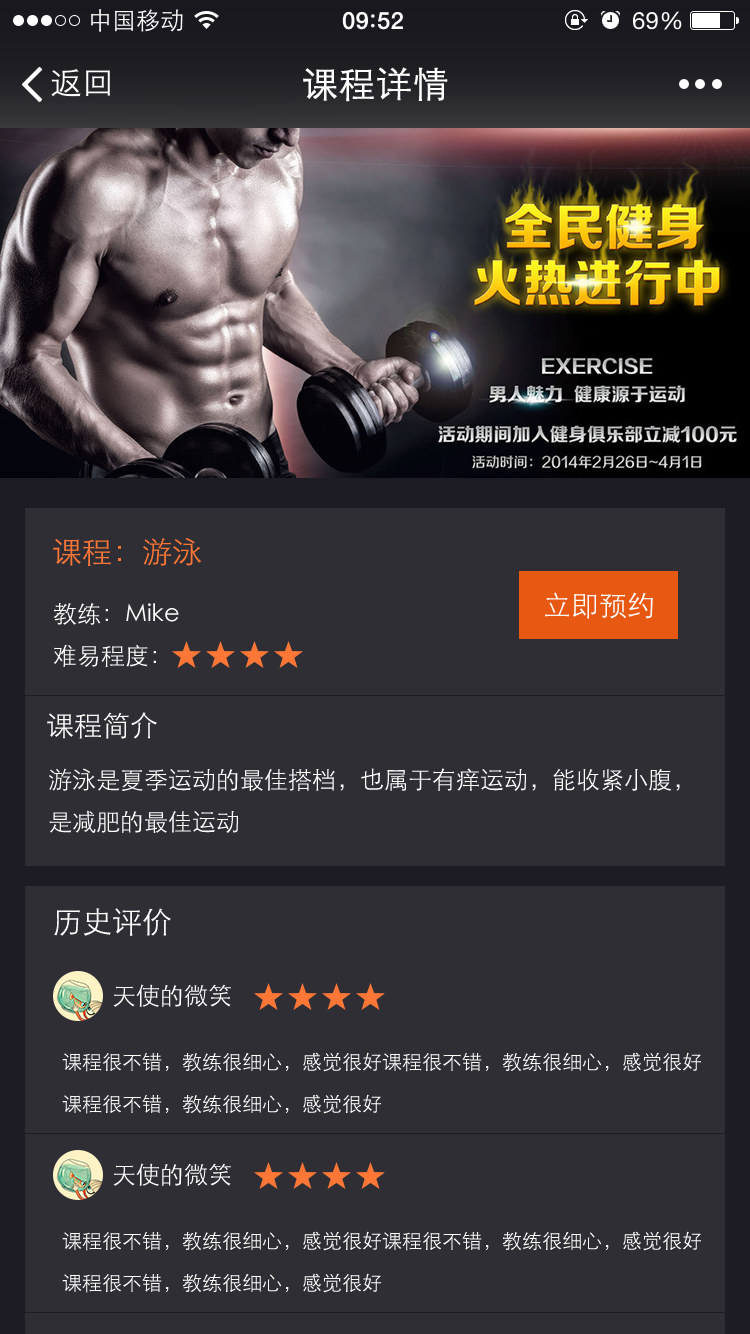
<style>
.page{position:relative;width:750px;height:1334px;background:#2f2e34}
.page>*{position:absolute;margin:0}
.t1{font:36px "STXihei";color:#ffffff;font-weight:bold}
.t2{font:30px "STXihei";color:#ff7736}
.t3{font:28px "STXihei";color:#ffffff}
.t4{font:24px "STXihei";color:#ffffff}
.t5{font:24px/42px "STXihei";color:#ffffff}
.t6{font:30px "STXihei";color:#ffffff}
.t7{font:20px/42px "STXihei";color:#ffffff}
</style>
<div class="page">
<p class="t1" style="left:303px;top:67px;width:145px;height:35px">课程详情</p>
<p class="t2" style="left:53px;top:537px;width:149px;height:29px">课程：游泳</p>
<p class="t3" style="left:545px;top:592px;width:108px;height:27px">立即预约</p>
<p class="t4" style="left:53px;top:603px;width:126px;height:22px">教练：Mike</p>
<p class="t4" style="left:53px;top:644px;width:103px;height:23px">难易程度：</p>
<p class="t3" style="left:47px;top:712px;width:110px;height:27px">课程简介</p>
<p class="t5" style="left:49px;top:768px;width:631px;height:65px">游泳是夏季运动的最佳搭档，也属于有痒运动，能收紧小腹，<br>是减肥的最佳运动</p>
<p class="t6" style="left:54px;top:908px;width:117px;height:28px">历史评价</p>
<p class="t4" style="left:113px;top:984px;width:118px;height:23px">天使的微笑</p>
<p class="t7" style="left:62px;top:1052px;width:639px;height:62px">课程很不错，教练很细心，感觉很好课程很不错，教练很细心，感觉很好<br>课程很不错，教练很细心，感觉很好</p>
<p class="t4" style="left:113px;top:1163px;width:118px;height:23px">天使的微笑</p>
<p class="t7" style="left:62px;top:1231px;width:639px;height:62px">课程很不错，教练很细心，感觉很好课程很不错，教练很细心，感觉很好<br>课程很不错，教练很细心，感觉很好</p>
</div>
